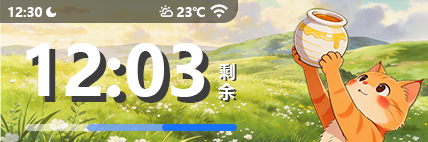
<style>
.page{position:relative;width:428px;height:142px}
.page>*{position:absolute;margin:0}
.t1{font:12.8px "MicrosoftYaHei-Bold";color:#ffffff}
.t2{font:13px "MicrosoftYaHei-Bold";color:#ffffff}
.t3{font:68.5px "MicrosoftYaHei-Bold";color:#ffffff}
.t4{font:68.5px "MicrosoftYaHei-Bold"}
.t5{font:17px "MicrosoftYaHei-Bold";color:#ffffff}
.t6{font:17px "MicrosoftYaHei-Bold"}
</style>
<div class="page">
<p class="t1" style="left:8px;top:7px;width:35px;height:10px">12:30</p>
<p class="t2" style="left:177px;top:7px;width:28px;height:10px">23℃</p>
<p class="t3" style="left:26px;top:43px;width:179px;height:54px">12:03</p>
<p class="t4" style="left:32px;top:49px;width:179px;height:54px">12:03</p>
<p class="t5" style="left:218px;top:63px;width:17px;height:17px">剩</p>
<p class="t6" style="left:220px;top:64px;width:17px;height:17px">剩</p>
<p class="t5" style="left:218px;top:83px;width:17px;height:17px">余</p>
<p class="t6" style="left:220px;top:85px;width:17px;height:17px">余</p>
</div>
